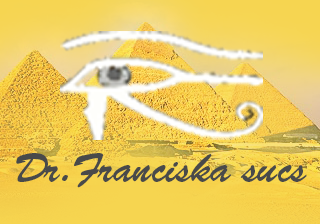
<style>
.page{position:relative;width:320px;height:224px}
.page>*{position:absolute;margin:0}
.t1{font:40px "BrushScriptStd";color:#494a4a}
</style>
<div class="page">
<p class="t1" style="left:16px;top:153px;width:291px;height:35px">Dr.Franciska sucs</p>
</div>
